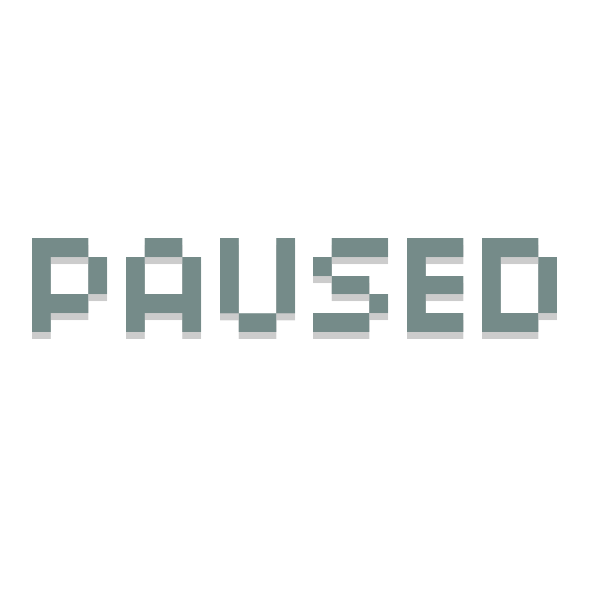
<style>
.page{position:relative;width:600px;height:600px;background:#ffffff}
.page>*{position:absolute;margin:0}
.t1{font:150px "04b03";color:#758b89}
</style>
<div class="page">
<p class="t1" style="left:32px;top:245px;width:525px;height:94px">PAUSED</p>
<p class="t1" style="left:32px;top:238px;width:525px;height:94px">PAUSED</p>
</div>
